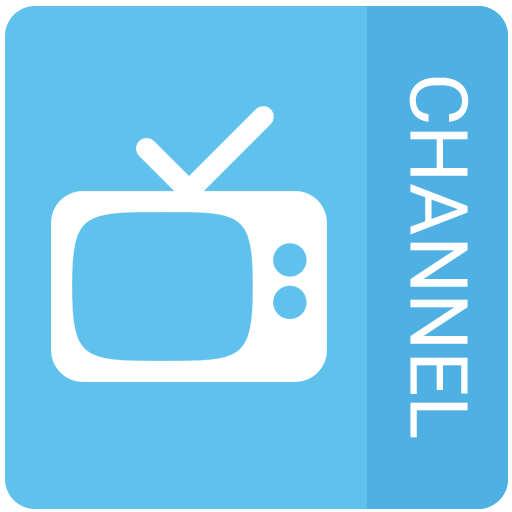
<style>
.page{position:relative;width:512px;height:512px;background:#5fc1ec}
.page>*{position:absolute;margin:0}
.t1{font:80px "Roboto-Regular";color:#ffffff}
</style>
<div class="page">
<p class="t1" style="left:409px;top:77px;width:60px;height:361px;rotate:90deg">CHANNEL</p>
</div>
